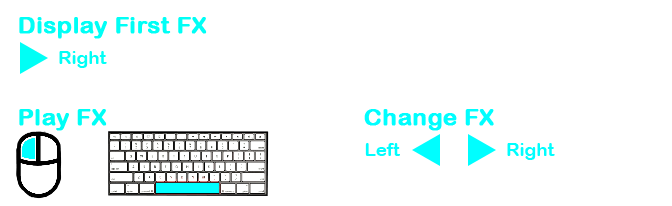
<style>
.page{position:relative;width:672px;height:206px;background:#ffffff}
.page>*{position:absolute;margin:0}
.t1{font:23px "ArialRoundedMTBold";color:#00fff6;font-weight:bold;scale:1.04 1}
.t2{font:17.9px "ArialRoundedMTBold";color:#00fff6;scale:1.04 1}
.t3{font:23px "ArialRoundedMTBold";color:#00feff;font-weight:bold;scale:1.04 1}
.t4{font:17.9px "ArialRoundedMTBold";color:#00feff;scale:1.04 1}
</style>
<div class="page">
<p class="t1" style="left:19px;top:17px;width:188px;height:22px">Display First FX</p>
<p class="t2" style="left:59px;top:51px;width:48px;height:17px">Right</p>
<p class="t1" style="left:19px;top:109px;width:88px;height:22px">Play FX</p>
<p class="t3" style="left:364px;top:109px;width:130px;height:22px">Change FX</p>
<p class="t4" style="left:365px;top:143px;width:35px;height:13px">Left</p>
<p class="t4" style="left:507px;top:143px;width:48px;height:17px">Right</p>
</div>
